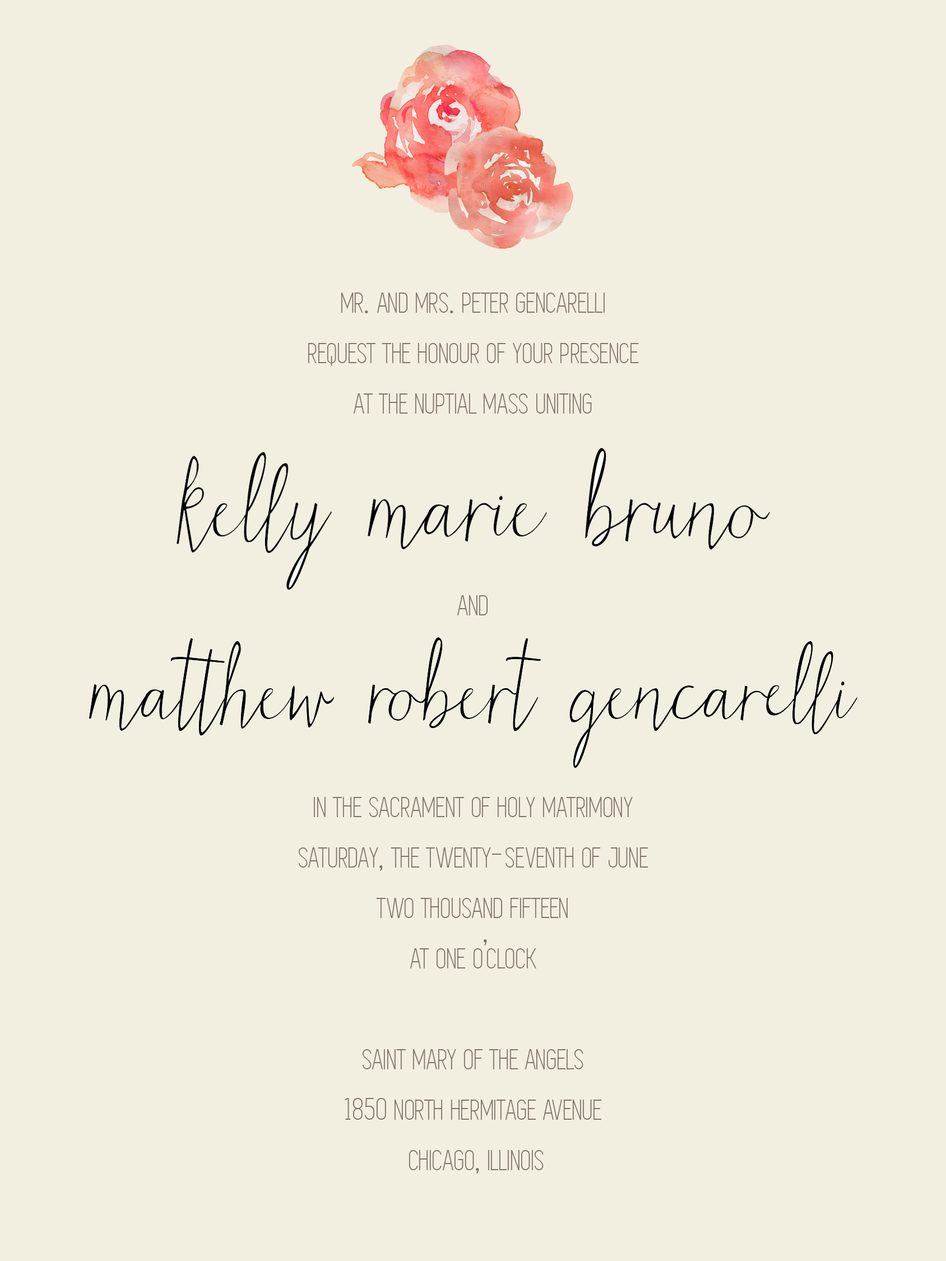
<style>
.page{position:relative;width:946px;height:1261px;background:#f3efe0}
.page>*{position:absolute;margin:0}
.t1{font:42px "Simplifica";color:#80746b;font-variant:small-caps}
.t2{font:32.7px "Simplifica";color:#80746b}
</style>
<div class="page">
<p class="t1" style="left:298px;top:292px;width:350px;height:881px;text-align:center">mr. and mrs. peter gencarelli<br>request the honour of your presence<br>at the nuptial mass uniting<br><br><br><br>and<br><br><br><br>in the sacrament of holy matrimony<br>saturday, the twenty-seventh of june<br>two thousand fifteen<br>at one o’clock<br><br>saint mary of the angels<br><span class="t2">1850</span> north hermitage avenue<br> chicago, illinois</p>
</div>
